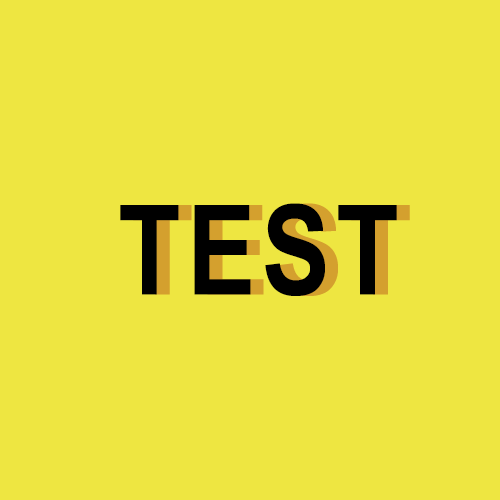
<style>
.page{position:relative;width:500px;height:500px;background:#eee641}
.page>*{position:absolute;margin:0}
.t1{font:125px "ArialNarrow-Bold";letter-spacing:0.05em;color:#000000;text-transform:uppercase}
</style>
<div class="page">
<p class="t1" style="left:120px;top:203px;width:277px;height:93px">Test</p>
</div>
